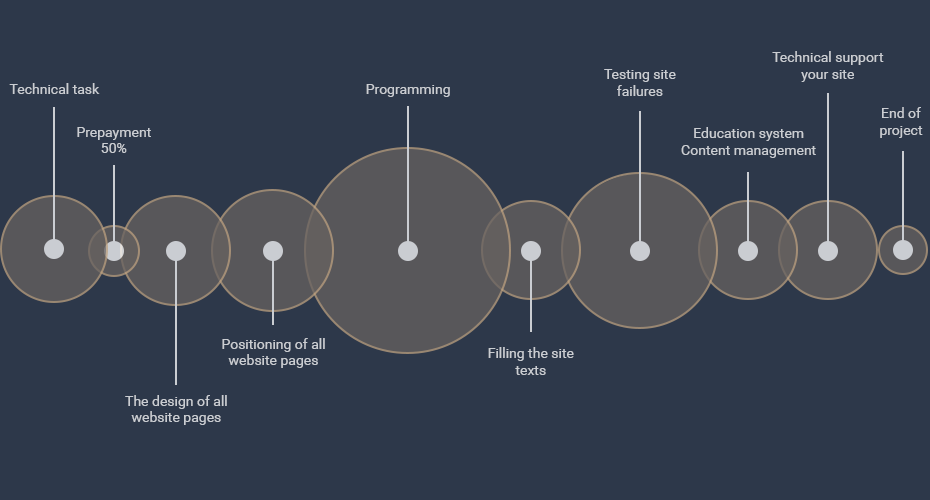
<style>
.page{position:relative;width:930px;height:500px;background:#2d384a}
.page>*{position:absolute;margin:0}
.t1{font:14px "Roboto-Regular";color:#cacdd2}
</style>
<div class="page">
<p class="t1" style="left:772px;top:51px;width:112px;height:31px;text-align:center">Technical support<br>your site</p>
<p class="t1" style="left:604px;top:69px;width:72px;height:27px;text-align:center">Testing site<br>failures</p>
<p class="t1" style="left:9px;top:83px;width:91px;height:11px">Technical task</p>
<p class="t1" style="left:366px;top:84px;width:84px;height:13px">Programming</p>
<p class="t1" style="left:880px;top:107px;width:43px;height:31px;text-align:center">End of<br>project</p>
<p class="t1" style="left:77px;top:127px;width:74px;height:26px;text-align:center">Prepayment<br>50%</p>
<p class="t1" style="left:681px;top:127px;width:135px;height:31px;text-align:center">Education system<br>Content management</p>
<p class="t1" style="left:222px;top:338px;width:103px;height:30px;text-align:center">Positioning of all<br>website pages</p>
<p class="t1" style="left:488px;top:347px;width:86px;height:28px;text-align:center">Filling the site<br>texts</p>
<p class="t1" style="left:125px;top:395px;width:102px;height:30px;text-align:center">The design of all<br>website pages</p>
</div>
